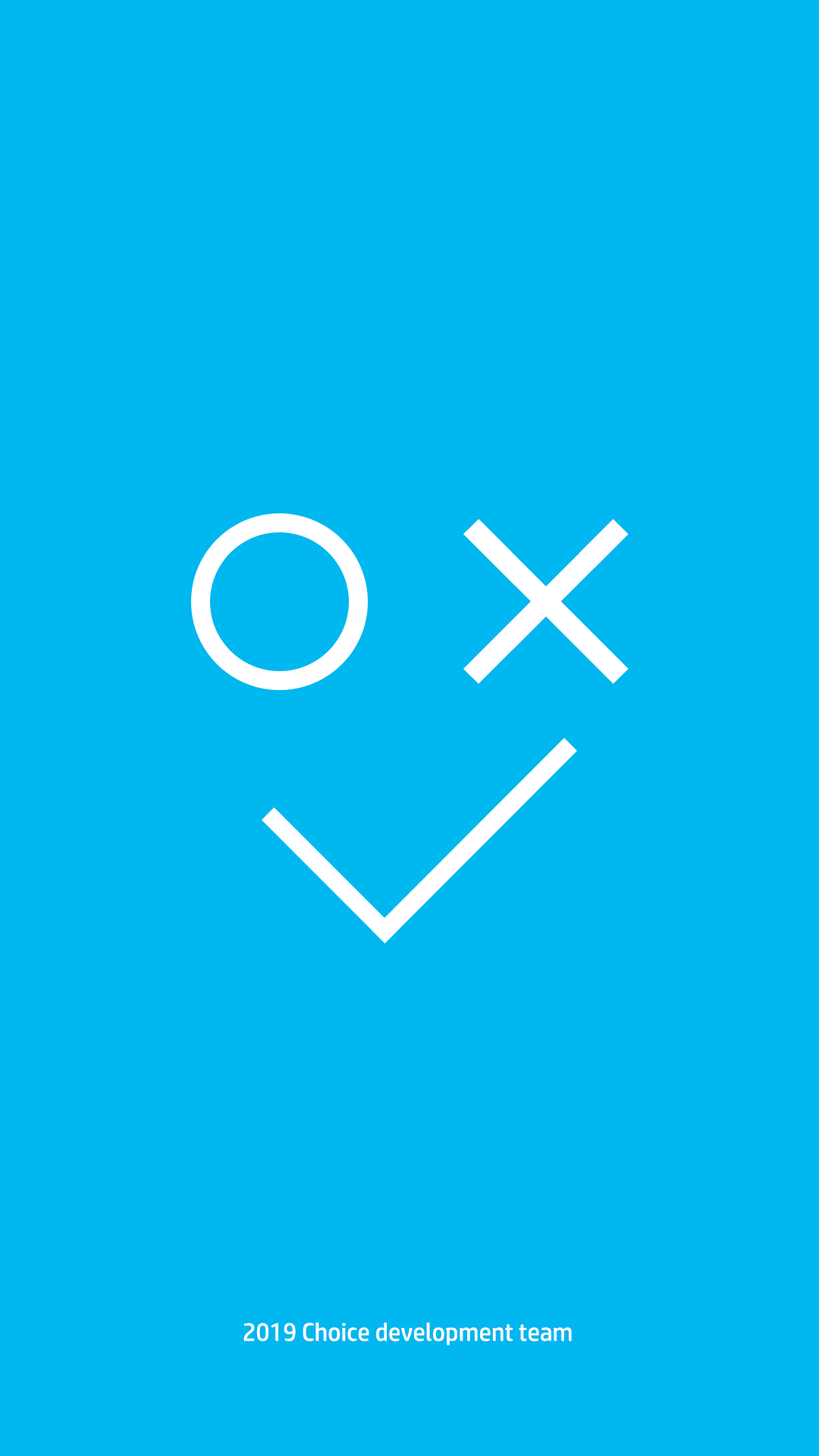
<style>
.page{position:relative;width:819px;height:1456px;background:#00b7ef}
.page>*{position:absolute;margin:0}
.t1{font:252.8px "AdobeHeitiStd-Regular";color:#ffffff}
.t2{font:25.3px "HPSimplified-Regular";color:#ffffff}
</style>
<div class="page">
<p class="t1" style="left:463px;top:519px;width:166px;height:165px">×</p>
<p class="t2" style="left:243px;top:1323px;width:329px;height:22px">2019 Choice development team</p>
</div>
